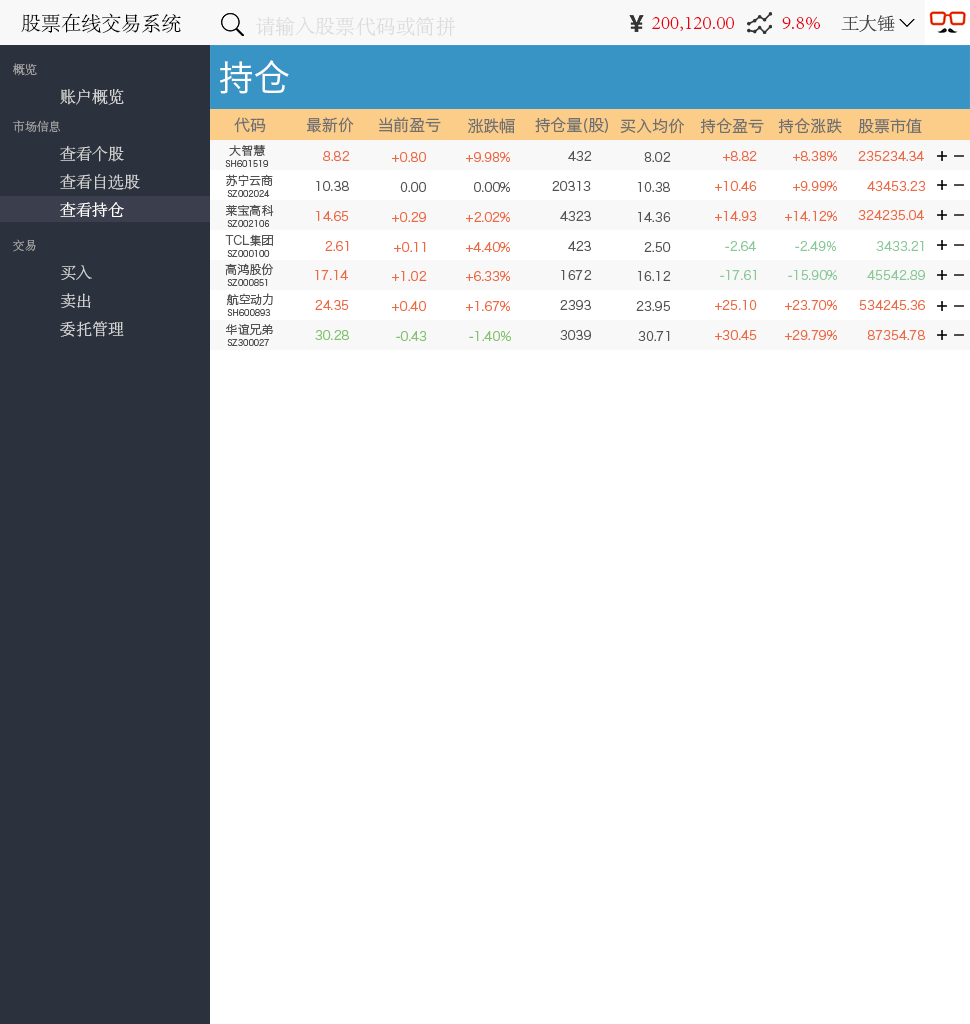
<style>
.page{position:relative;width:970px;height:1024px;background:#ffffff}
.page>*{position:absolute;margin:0}
.t1{font:20px "AdobeSongStd-Light";color:#000000}
.t2{font:20px "AdobeSongStd-Light";color:#dcdcdc}
.t3{font:20px "AdobeSongStd-Light";color:#e60012}
.t4{font:18px "AdobeSongStd-Light";color:#434343}
.t5{font:12px "AdobeSongStd-Light";color:#a0a0a0}
.t6{font:36px "HiraginoSansGB-W3";color:#ffffff}
.t7{font:16px "AdobeSongStd-Light";color:#d2d2d2}
.t8{font:16px "HiraginoSansGB-W3";color:#707070}
.t9{font:12px "HiraginoSansGB-W3";color:#535353}
.t10{font:8px "HiraginoSansGB-W3";color:#535353}
.t11{font:12px "HiraginoSansGB-W3";color:#ec6941}
.t12{font:16px "AdobeSongStd-Light";color:#ffffff}
.t13{font:12px "HiraginoSansGB-W3";color:#89c997}
.t14{font:12px "HiraginoSansGB-W3";color:#80c269}
</style>
<div class="page">
<p class="t1" style="left:21px;top:13px;width:160px;height:21px">股票在线交易系统</p>
<p class="t2" style="left:255px;top:16px;width:200px;height:21px">请输入股票代码或简拼</p>
<p class="t3" style="left:652px;top:17px;width:82px;height:14px">200,120.00</p>
<p class="t3" style="left:782px;top:16px;width:38px;height:14px">9.8%</p>
<p class="t4" style="left:841px;top:15px;width:54px;height:17px">王大锤</p>
<p class="t5" style="left:13px;top:63px;width:24px;height:13px">概览</p>
<p class="t6" style="left:220px;top:60px;width:69px;height:34px">持仓</p>
<p class="t7" style="left:60px;top:89px;width:64px;height:16px">账户概览</p>
<p class="t5" style="left:13px;top:120px;width:47px;height:13px">市场信息</p>
<p class="t8" style="left:234px;top:117px;width:32px;height:16px">代码</p>
<p class="t8" style="left:306px;top:117px;width:48px;height:16px">最新价</p>
<p class="t8" style="left:379px;top:117px;width:62px;height:16px">当前盈亏</p>
<p class="t8" style="left:468px;top:118px;width:47px;height:16px">涨跌幅</p>
<p class="t8" style="left:535px;top:117px;width:73px;height:17px">持仓量(股)</p>
<p class="t8" style="left:620px;top:118px;width:65px;height:16px">买入均价</p>
<p class="t8" style="left:700px;top:118px;width:64px;height:16px">持仓盈亏</p>
<p class="t8" style="left:778px;top:118px;width:64px;height:16px">持仓涨跌</p>
<p class="t8" style="left:858px;top:118px;width:64px;height:16px">股票市值</p>
<p class="t7" style="left:60px;top:146px;width:64px;height:16px">查看个股</p>
<p class="t9" style="left:229px;top:144px;width:36px;height:12px">大智慧</p>
<p class="t10" style="left:225px;top:160px;width:44px;height:7px">SH601519</p>
<p class="t11" style="left:323px;top:151px;width:27px;height:10px">8.82</p>
<p class="t11" style="left:392px;top:152px;width:34px;height:10px">+0.80</p>
<p class="t11" style="left:466px;top:152px;width:44px;height:10px">+9.98%</p>
<p class="t9" style="left:568px;top:151px;width:24px;height:10px">432</p>
<p class="t9" style="left:644px;top:152px;width:27px;height:10px">8.02</p>
<p class="t11" style="left:723px;top:151px;width:34px;height:10px">+8.82</p>
<p class="t11" style="left:793px;top:151px;width:44px;height:10px">+8.38%</p>
<p class="t11" style="left:858px;top:151px;width:66px;height:10px">235234.34</p>
<p class="t7" style="left:60px;top:174px;width:80px;height:16px">查看自选股</p>
<p class="t9" style="left:226px;top:174px;width:47px;height:12px">苏宁云商</p>
<p class="t9" style="left:316px;top:181px;width:33px;height:10px">10.38</p>
<p class="t9" style="left:400px;top:182px;width:26px;height:10px">0.00</p>
<p class="t9" style="left:474px;top:182px;width:36px;height:10px">0.00%</p>
<p class="t9" style="left:552px;top:181px;width:39px;height:10px">20313</p>
<p class="t9" style="left:638px;top:182px;width:32px;height:10px">10.38</p>
<p class="t11" style="left:715px;top:181px;width:42px;height:10px">+10.46</p>
<p class="t11" style="left:793px;top:181px;width:44px;height:10px">+9.99%</p>
<p class="t11" style="left:867px;top:181px;width:58px;height:10px">43453.23</p>
<p class="t10" style="left:227px;top:190px;width:43px;height:7px">SZ002024</p>
<p class="t12" style="left:60px;top:202px;width:64px;height:15px">查看持仓</p>
<p class="t9" style="left:225px;top:204px;width:49px;height:13px">莱宝高科</p>
<p class="t10" style="left:227px;top:220px;width:43px;height:7px">SZ002106</p>
<p class="t11" style="left:316px;top:211px;width:33px;height:10px">14.65</p>
<p class="t11" style="left:392px;top:212px;width:34px;height:10px">+0.29</p>
<p class="t11" style="left:466px;top:212px;width:44px;height:10px">+2.02%</p>
<p class="t9" style="left:560px;top:211px;width:31px;height:10px">4323</p>
<p class="t9" style="left:638px;top:212px;width:33px;height:10px">14.36</p>
<p class="t11" style="left:715px;top:211px;width:42px;height:10px">+14.93</p>
<p class="t11" style="left:785px;top:211px;width:52px;height:10px">+14.12%</p>
<p class="t11" style="left:858px;top:210px;width:66px;height:10px">324235.04</p>
<p class="t5" style="left:13px;top:239px;width:23px;height:13px">交易</p>
<p class="t9" style="left:225px;top:234px;width:48px;height:12px">TCL集团</p>
<p class="t11" style="left:325px;top:241px;width:24px;height:10px">2.61</p>
<p class="t11" style="left:394px;top:242px;width:32px;height:10px">+0.11</p>
<p class="t11" style="left:466px;top:242px;width:44px;height:10px">+4.40%</p>
<p class="t9" style="left:568px;top:241px;width:23px;height:10px">423</p>
<p class="t9" style="left:644px;top:242px;width:27px;height:10px">2.50</p>
<p class="t13" style="left:725px;top:241px;width:31px;height:10px">-2.64</p>
<p class="t13" style="left:795px;top:241px;width:41px;height:10px">-2.49%</p>
<p class="t13" style="left:876px;top:241px;width:48px;height:10px">3433.21</p>
<p class="t10" style="left:227px;top:250px;width:43px;height:7px">SZ000100</p>
<p class="t7" style="left:60px;top:265px;width:32px;height:15px">买入</p>
<p class="t9" style="left:225px;top:263px;width:49px;height:13px">高鸿股份</p>
<p class="t11" style="left:315px;top:270px;width:33px;height:10px">17.14</p>
<p class="t9" style="left:561px;top:270px;width:31px;height:10px">1672</p>
<p class="t13" style="left:720px;top:270px;width:37px;height:10px">-17.61</p>
<p class="t13" style="left:788px;top:270px;width:49px;height:10px">-15.90%</p>
<p class="t13" style="left:867px;top:270px;width:58px;height:10px">45542.89</p>
<p class="t10" style="left:227px;top:279px;width:41px;height:7px">SZ000851</p>
<p class="t11" style="left:392px;top:271px;width:35px;height:10px">+1.02</p>
<p class="t11" style="left:466px;top:271px;width:44px;height:10px">+6.33%</p>
<p class="t9" style="left:638px;top:271px;width:33px;height:10px">16.12</p>
<p class="t7" style="left:60px;top:293px;width:31px;height:15px">卖出</p>
<p class="t9" style="left:226px;top:293px;width:47px;height:13px">航空动力</p>
<p class="t11" style="left:315px;top:300px;width:34px;height:10px">24.35</p>
<p class="t11" style="left:392px;top:301px;width:34px;height:10px">+0.40</p>
<p class="t11" style="left:466px;top:301px;width:44px;height:10px">+1.67%</p>
<p class="t9" style="left:560px;top:300px;width:31px;height:10px">2393</p>
<p class="t9" style="left:636px;top:301px;width:34px;height:10px">23.95</p>
<p class="t11" style="left:715px;top:300px;width:42px;height:10px">+25.10</p>
<p class="t11" style="left:785px;top:300px;width:52px;height:10px">+23.70%</p>
<p class="t11" style="left:859px;top:300px;width:66px;height:10px">534245.36</p>
<p class="t10" style="left:227px;top:309px;width:44px;height:7px">SH600893</p>
<p class="t7" style="left:60px;top:321px;width:64px;height:16px">委托管理</p>
<p class="t9" style="left:226px;top:323px;width:47px;height:13px">华谊兄弟</p>
<p class="t10" style="left:227px;top:339px;width:42px;height:7px">SZ300027</p>
<p class="t14" style="left:315px;top:330px;width:34px;height:10px">30.28</p>
<p class="t14" style="left:396px;top:331px;width:31px;height:10px">-0.43</p>
<p class="t14" style="left:469px;top:331px;width:42px;height:10px">-1.40%</p>
<p class="t9" style="left:560px;top:330px;width:31px;height:10px">3039</p>
<p class="t9" style="left:638px;top:331px;width:32px;height:10px">30.71</p>
<p class="t11" style="left:715px;top:330px;width:42px;height:10px">+30.45</p>
<p class="t11" style="left:785px;top:330px;width:52px;height:10px">+29.79%</p>
<p class="t11" style="left:867px;top:330px;width:58px;height:10px">87354.78</p>
</div>
